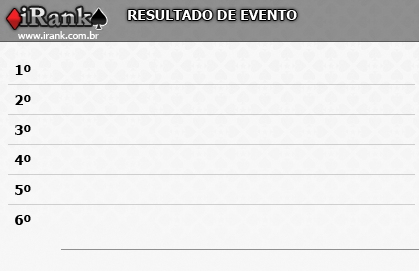
<style>
.page{position:relative;width:419px;height:271px;background:#f7f7f7}
.page>*{position:absolute;margin:0}
.t1{font:26.4px "Garamond-Bold";font-weight:bold}
.t2{font:14px "Tahoma-Bold";color:#ffffff}
.t3{font:10px "Tahoma";color:#ffffff}
.t4{font:14px "Tahoma-Bold";color:#000000}
</style>
<div class="page">
<p class="t1" style="left:20px;top:7px;width:71px;height:19px">iRank</p>
<p class="t2" style="left:128px;top:10px;width:169px;height:10px">RESULTADO DE EVENTO</p>
<p class="t3" style="left:18px;top:31px;width:81px;height:8px">www.irank.com.br</p>
<p class="t4" style="left:15px;top:65px;width:16px;height:10px">1º</p>
<p class="t4" style="left:15px;top:95px;width:16px;height:10px">2º</p>
<p class="t4" style="left:15px;top:125px;width:16px;height:10px">3º</p>
<p class="t4" style="left:14px;top:155px;width:17px;height:10px">4º</p>
<p class="t4" style="left:15px;top:185px;width:16px;height:10px">5º</p>
<p class="t4" style="left:15px;top:215px;width:16px;height:10px">6º</p>
</div>
